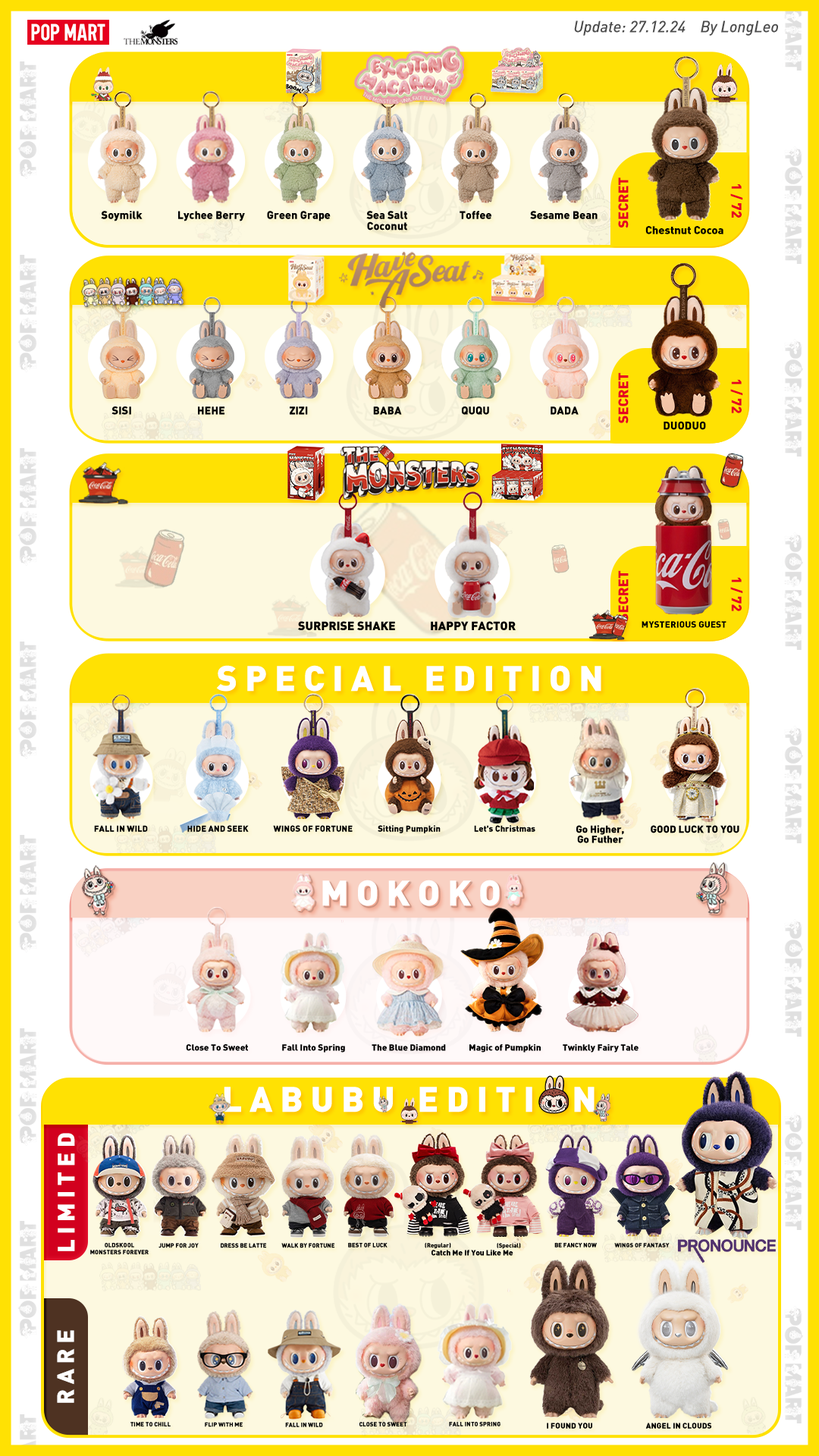
<style>
.page{position:relative;width:819px;height:1456px}
.page>*{position:absolute;margin:0}
.t1{font:15.8px "DINPro-MediumItalic";color:#4c4c4c}
.t2{font:13.9px "DINPro-Black";color:#e60020}
.t3{font:11px "DINPro-Black";color:#000000}
.t4{font:11px/11px "DINPro-Black";color:#000000}
.t5{font:11.1px "DINPro-Black";color:#000000}
.t6{font:12px "DINPro-Black";color:#000000}
.t7{font:9.1px "DINPro-Black";color:#000000}
.t8{font:35.3px "DINPro-Black";letter-spacing:0.2em;color:#ffffff;text-transform:uppercase}
.t9{font:8.6px "DINPro-Black";color:#000000}
.t10{font:10.1px/10.1px "DINPro-Black";color:#000000}
.t11{font:10.1px "DINPro-Black";color:#000000}
.t12{font:8.9px "DINPro-Black";color:#000000}
.t13{font:23.4px "DINPro-Black";letter-spacing:0.2em;color:#ffffff;text-transform:uppercase}
.t14{font:5.9px/7px "DINPro-Black";color:#000000;text-transform:uppercase}
.t15{font:5.9px "DINPro-Black";color:#000000}
.t16{font:7.6px "DINPro-Black";color:#000000}
.t17{font:23.5px "DINPro-Black";letter-spacing:0.2em;color:#ffffff;text-transform:uppercase}
.t18{font:5.9px "DINPro-Black";color:#000000;text-transform:uppercase}
.t19{font:7.8px "DINPro-Black";color:#000000;text-transform:uppercase}
</style>
<div class="page">
<p class="t1" style="left:574px;top:20px;width:112px;height:16px">Update: 27.12.24</p>
<p class="t1" style="left:701px;top:20px;width:77px;height:16px">By LongLeo</p>
<p class="t2" style="left:618px;top:177px;width:11px;height:51px;rotate:-90deg">SECRET</p>
<p class="t2" style="left:730px;top:184px;width:13px;height:34px;rotate:90deg">1 / 72</p>
<p class="t3" style="left:101px;top:211px;width:42px;height:10px">Soymilk</p>
<p class="t3" style="left:178px;top:211px;width:67px;height:10px">Lychee Berry</p>
<p class="t3" style="left:267px;top:211px;width:64px;height:10px">Green Grape</p>
<p class="t4" style="left:366px;top:211px;width:41px;height:20px;text-align:center">Sea Salt<br>Coconut</p>
<p class="t3" style="left:460px;top:211px;width:31px;height:8px">Toffee</p>
<p class="t3" style="left:530px;top:211px;width:68px;height:8px">Sesame Bean</p>
<p class="t5" style="left:645px;top:226px;width:78px;height:8px">Chestnut Cocoa</p>
<p class="t2" style="left:618px;top:372px;width:11px;height:52px;rotate:-90deg">SECRET</p>
<p class="t2" style="left:730px;top:379px;width:13px;height:34px;rotate:90deg">1 / 72</p>
<p class="t3" style="left:111px;top:406px;width:20px;height:9px">SISI</p>
<p class="t3" style="left:198px;top:406px;width:26px;height:9px">HEHE</p>
<p class="t3" style="left:290px;top:406px;width:18px;height:9px">ZIZI</p>
<p class="t3" style="left:373px;top:406px;width:29px;height:9px">BABA</p>
<p class="t3" style="left:462px;top:406px;width:27px;height:9px">QUQU</p>
<p class="t3" style="left:551px;top:406px;width:28px;height:9px">DADA</p>
<p class="t5" style="left:664px;top:421px;width:42px;height:9px">DUODUO</p>
<p class="t2" style="left:618px;top:570px;width:11px;height:52px;rotate:-90deg">SECRET</p>
<p class="t2" style="left:730px;top:577px;width:13px;height:34px;rotate:90deg">1 / 72</p>
<p class="t6" style="left:298px;top:621px;width:97px;height:9px">SURPRISE SHAKE</p>
<p class="t6" style="left:431px;top:621px;width:85px;height:9px">HAPPY FACTOR</p>
<p class="t7" style="left:642px;top:621px;width:84px;height:7px">MYSTERIOUS GUEST</p>
<p class="t8" style="left:216px;top:665px;width:385px;height:27px">SPECIAL edition</p>
<p class="t9" style="left:94px;top:825px;width:54px;height:7px">FALL IN WILD</p>
<p class="t9" style="left:187px;top:825px;width:62px;height:7px">HIDE AND SEEK</p>
<p class="t9" style="left:273px;top:825px;width:80px;height:7px">WINGS OF FORTUNE</p>
<p class="t9" style="left:378px;top:825px;width:63px;height:8px">Sitting Pumpkin</p>
<p class="t9" style="left:474px;top:825px;width:61px;height:7px">Let's Christmas</p>
<p class="t10" style="left:576px;top:825px;width:48px;height:18px;text-align:center">Go Higher,<br>Go Futher</p>
<p class="t11" style="left:651px;top:825px;width:88px;height:8px">GOOD LUCK TO YOU</p>
<p class="t8" style="left:322px;top:880px;width:178px;height:26px">MOKOKO</p>
<p class="t12" style="left:186px;top:1044px;width:62px;height:7px">Close To Sweet</p>
<p class="t12" style="left:282px;top:1044px;width:63px;height:9px">Fall Into Spring</p>
<p class="t12" style="left:372px;top:1044px;width:74px;height:7px">The Blue Diamond</p>
<p class="t12" style="left:469px;top:1044px;width:72px;height:9px">Magic of Pumpkin</p>
<p class="t12" style="left:563px;top:1044px;width:76px;height:9px">Twinkly Fairy Tale</p>
<p class="t8" style="left:224px;top:1086px;width:371px;height:26px">LABUBU edition</p>
<p class="t13" style="left:58px;top:1133px;width:17px;height:118px;rotate:-90deg">limited</p>
<p class="t14" style="left:90px;top:1243px;width:59px;height:11px;text-align:center">Oldskool<br>Monsters Forever</p>
<p class="t15" style="left:158px;top:1243px;width:41px;height:5px">JUMP FOR JOY</p>
<p class="t15" style="left:221px;top:1243px;width:45px;height:5px">DRESS BE LATTE</p>
<p class="t15" style="left:281px;top:1243px;width:53px;height:5px">WALK BY FORTUNE</p>
<p class="t15" style="left:348px;top:1243px;width:40px;height:4px">BEST OF LUCK</p>
<p class="t15" style="left:425px;top:1242px;width:26px;height:7px">(Regular)</p>
<p class="t16" style="left:431px;top:1250px;width:82px;height:6px">Catch Me If You Like Me</p>
<p class="t15" style="left:497px;top:1243px;width:24px;height:6px">(Special)</p>
<p class="t15" style="left:554px;top:1243px;width:43px;height:4px">BE FANCY NOW</p>
<p class="t15" style="left:614px;top:1243px;width:56px;height:4px">WINGS OF FANTASY</p>
<p class="t17" style="left:57px;top:1330px;width:17px;height:73px;rotate:-90deg">rare</p>
<p class="t18" style="left:130px;top:1422px;width:41px;height:4px">Time to Chill</p>
<p class="t15" style="left:205px;top:1422px;width:38px;height:5px">FLIP WITH ME</p>
<p class="t18" style="left:359px;top:1422px;width:48px;height:4px">Close to sweet</p>
<p class="t18" style="left:449px;top:1422px;width:51px;height:4px">Fall Into Spring</p>
<p class="t15" style="left:285px;top:1423px;width:38px;height:4px">FALL IN WILD</p>
<p class="t19" style="left:547px;top:1423px;width:45px;height:6px">I FOUND YOU</p>
<p class="t19" style="left:645px;top:1423px;width:66px;height:6px">ANGEL IN CLOUDS</p>
</div>
